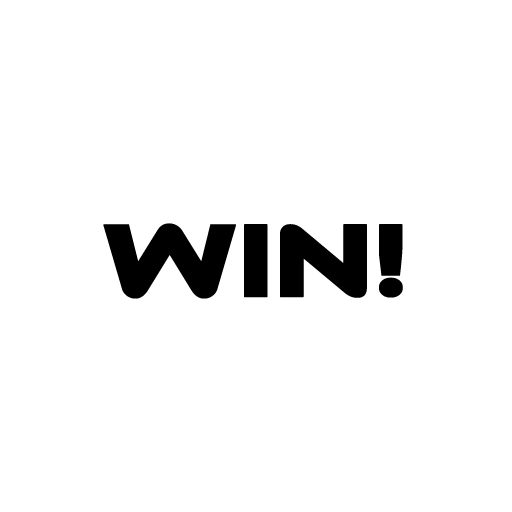
<style>
.page{position:relative;width:512px;height:512px;background:#ffffff}
.page>*{position:absolute;margin:0}
.t1{font:100px "Ethnocentric";color:#000000;font-weight:bold}
</style>
<div class="page">
<p class="t1" style="left:103px;top:223px;width:300px;height:76px">WIN!</p>
</div>
